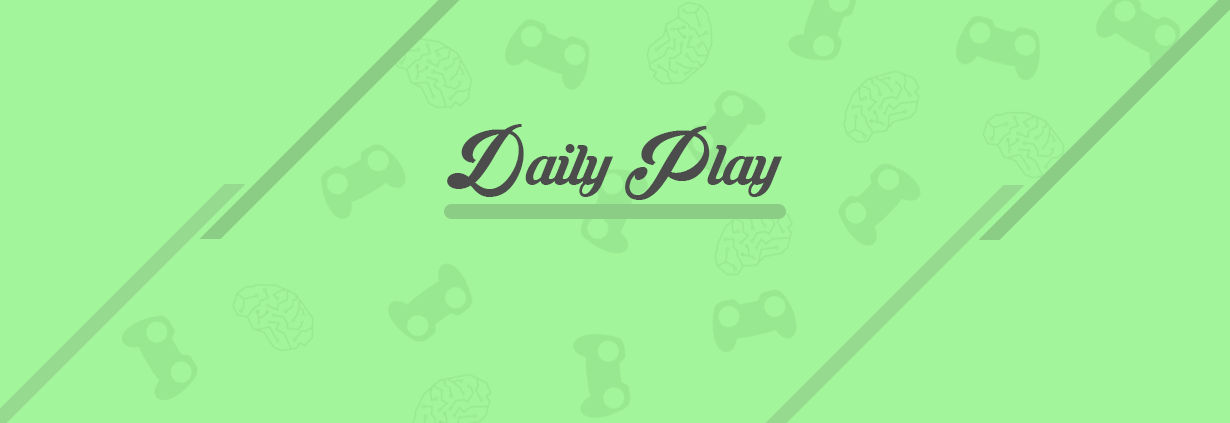
<style>
.page{position:relative;width:1230px;height:423px;background:#a2f59a}
.page>*{position:absolute;margin:0}
.t1{font:72px "KrinkesDecorPERSONALUSE";color:#4c4c4c}
</style>
<div class="page">
<p class="t1" style="left:447px;top:124px;width:336px;height:76px">Daily Play</p>
</div>
